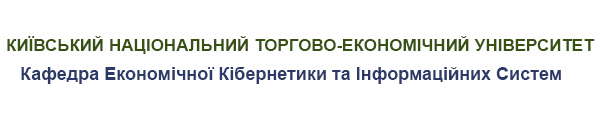
<style>
.page{position:relative;width:600px;height:130px;background:#fefefe}
.page>*{position:absolute;margin:0}
.t1{font:17px "Arial-BoldMT";color:#375111}
.t2{font:18px "Arial-BoldMT";color:#2d3a67}
</style>
<div class="page">
<p class="t1" style="left:7px;top:36px;width:588px;height:18px">КИЇВСЬКИЙ НАЦІОНАЛЬНИЙ ТОРГОВО-ЕКОНОМІЧНИЙ УНІВЕРСИТЕТ</p>
<p class="t2" style="left:21px;top:67px;width:540px;height:17px">Кафедра Економічної Кібернетики та Інформаційних Систем</p>
</div>
